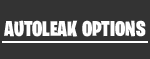
<style>
.page{position:relative;width:150px;height:59px;background:#333333}
.page>*{position:absolute;margin:0}
.t1{font:21.5px "BurbankBigCondensed-Black";color:#ffffff}
</style>
<div class="page">
<p class="t1" style="left:4px;top:20px;width:142px;height:17px">AUTOLEAK OPTIONS</p>
</div>
